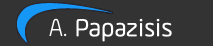
<style>
.page{position:relative;width:213px;height:46px;background:#333333}
.page>*{position:absolute;margin:0}
.t1{font:25.2px "AmpleSoft-Light";letter-spacing:0.01em;color:#ffffff;font-weight:bold;scale:0.93 1}
.t2{font:25.2px "AmpleSoft-Light";letter-spacing:0.01em;color:#ffffff;scale:0.93 1}
</style>
<div class="page">
<p class="t1" style="left:49px;top:18px;width:123px;height:24px"><span class="t2">A. </span>Papazisis</p>
</div>
